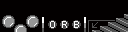
<style>
.page{position:relative;width:128px;height:32px;background:#030000}
.page>*{position:absolute;margin:0}
.t1{font:8px "Terminal";letter-spacing:0.75em;color:#fbfcfc}
</style>
<div class="page">
<p class="t1" style="left:50px;top:21px;width:29px;height:7px">ORB</p>
</div>
